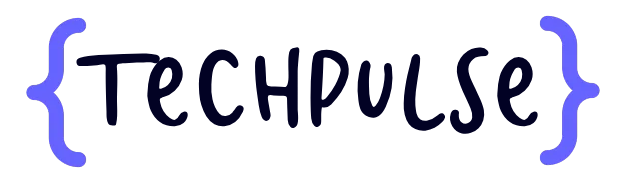
<style>
.page{position:relative;width:627px;height:179px;background:#ffffff}
.page>*{position:absolute;margin:0}
.t1{font:112px "MarketRegular";color:#020224}
</style>
<div class="page">
<p class="t1" style="left:76px;top:47px;width:462px;height:88px">TEchPulse</p>
</div>
